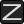
<style>
.page{position:relative;width:24px;height:24px;background:#252525}
.page>*{position:absolute;margin:0}
.t1{font:21px "Michroma";color:#dfdfdf}
</style>
<div class="page">
<p class="t1" style="left:2px;top:4px;width:20px;height:16px">Z</p>
</div>
